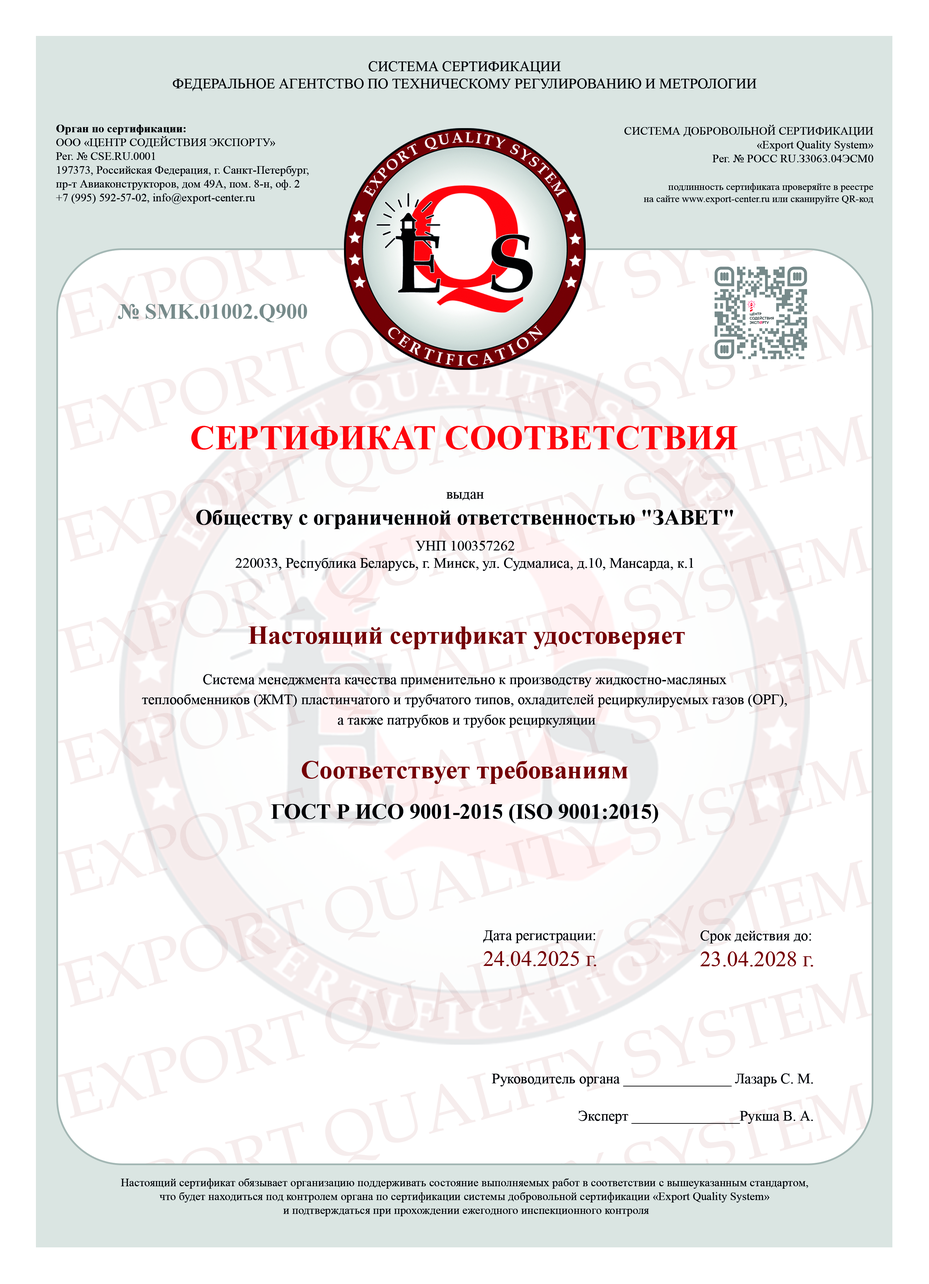
<style>
.page{position:relative;width:929px;height:1284px;background:#ffffff}
.page>*{position:absolute;margin:0}
.t1{font:14.4px "TimesNewRomanPSMT";color:#010102}
.t2{font:11.5px "TimesNewRomanPSMT";color:#010102}
.t3{font:11.5px "TimesNewRomanPS-BoldMT";color:#010102}
.t4{font:10.1px "TimesNewRomanPSMT";color:#010102}
.t5{font:21.6px "TimesNewRomanPS-BoldMT";color:#768b8b}
.t6{font:34.5px "TimesNewRomanPS-BoldMT";color:#fe040d}
.t7{font:21.6px/25.9px "TimesNewRomanPS-BoldMT";color:#010102}
.t8{font:14.4px/25.9px "TimesNewRomanPSMT";color:#010102}
.t9{font:14.4px/20.1px "TimesNewRomanPSMT";color:#010102}
.t10{font:25.9px/20.1px "TimesNewRomanPS-BoldMT";color:#730005}
.t11{font:21.6px/20.1px "TimesNewRomanPS-BoldMT";color:#010102}
.t12{font:21.6px "TimesNewRomanPSMT";color:#730005}
.t13{font:21.6px "TimesNewRomanPSMT";color:#740005}
</style>
<div class="page">
<p class="t1" style="left:173px;top:61px;width:584px;height:30px;text-align:center">СИСТЕМА СЕРТИФИКАЦИИ <br>ФЕДЕРАЛЬНОЕ АГЕНТСТВО ПО ТЕХНИЧЕСКОМУ РЕГУЛИРОВАНИЮ И МЕТРОЛОГИИ</p>
<p class="t2" style="left:56px;top:125px;width:253px;height:79px"><span class="t3">Орган по сертификации:</span> <br>ООО «ЦЕНТР СОДЕЙСТВИЯ ЭКСПОРТУ»<br>Рег. № CSE.RU.0001 <br>197373, Российская Федерация, г. Санкт-Петербург, <br>пр-т Авиаконструкторов, дом 49А, пом. 8-н, оф. 2<br>+7 (995) 592-57-02, info@export-center.ru</p>
<p class="t2" style="left:624px;top:125px;width:249px;height:37px;text-align:right">СИСТЕМА ДОБРОВОЛЬНОЙ СЕРТИФИКАЦИИ<br>«Export Quality System»<br>Рег. № РОСС RU.З3063.04ЭСМ0</p>
<p class="t4" style="left:644px;top:183px;width:229px;height:21px;text-align:right">подлинность сертификата проверяйте в реестре<br>на сайте www.export-center.ru или сканируйте QR-код</p>
<p class="t5" style="left:118px;top:304px;width:189px;height:18px">№ SMK.01002.Q900</p>
<p class="t6" style="left:191px;top:426px;width:547px;height:24px">СЕРТИФИКАТ СООТВЕТСТВИЯ</p>
<p class="t1" style="left:196px;top:492px;width:537px;height:79px;text-align:center">выдан<br><span class="t7">Обществу с ограниченной ответственностью "ЗАВЕТ"<br></span><span class="t8">УНП 100357262<br></span>220033, Республика Беларусь, г. Минск, ул. Судмалиса, д.10, Мансарда, к.1</p>
<p class="t9" style="left:142px;top:626px;width:645px;height:102px;text-align:center"><span class="t10">Настоящий сертификат удостоверяет<br><br></span>Система менеджмента качества применительно к производству жидкостно-масляных <br>теплообменников (ЖМТ) пластинчатого и трубчатого типов, охладителей рециркулируемых газов (ОРГ), <br>а также патрубков и трубок рециркуляции</p>
<p class="t11" style="left:271px;top:761px;width:387px;height:62px;text-align:center"><span class="t10">Соответствует требованиям<br><br></span>ГОСТ Р ИСО 9001-2015 (ISO 9001:2015)</p>
<p class="t1" style="left:483px;top:930px;width:113px;height:36px">Дата регистрации: <br><span class="t12">24.04.2025 г.</span></p>
<p class="t1" style="left:700px;top:930px;width:113px;height:36px">Срок действия до: <br><span class="t13">23.04.2028 г.</span></p>
<p class="t1" style="left:492px;top:1073px;width:321px;height:51px;text-align:right">Руководитель органа _______________ Лазарь С. М.<br><br>Эксперт _______________<span class="t9">Рукша В. А.</span></p>
<p class="t2" style="left:121px;top:1178px;width:687px;height:38px;text-align:center">Настоящий сертификат обязывает организацию поддерживать состояние выполняемых работ в соответствии с вышеуказанным стандартом, <br>что будет находиться под контролем органа по сертификации системы добровольной сертификации «Export Quality System» <br>и подтверждаться при прохождении ежегодного инспекционного контроля</p>
</div>
